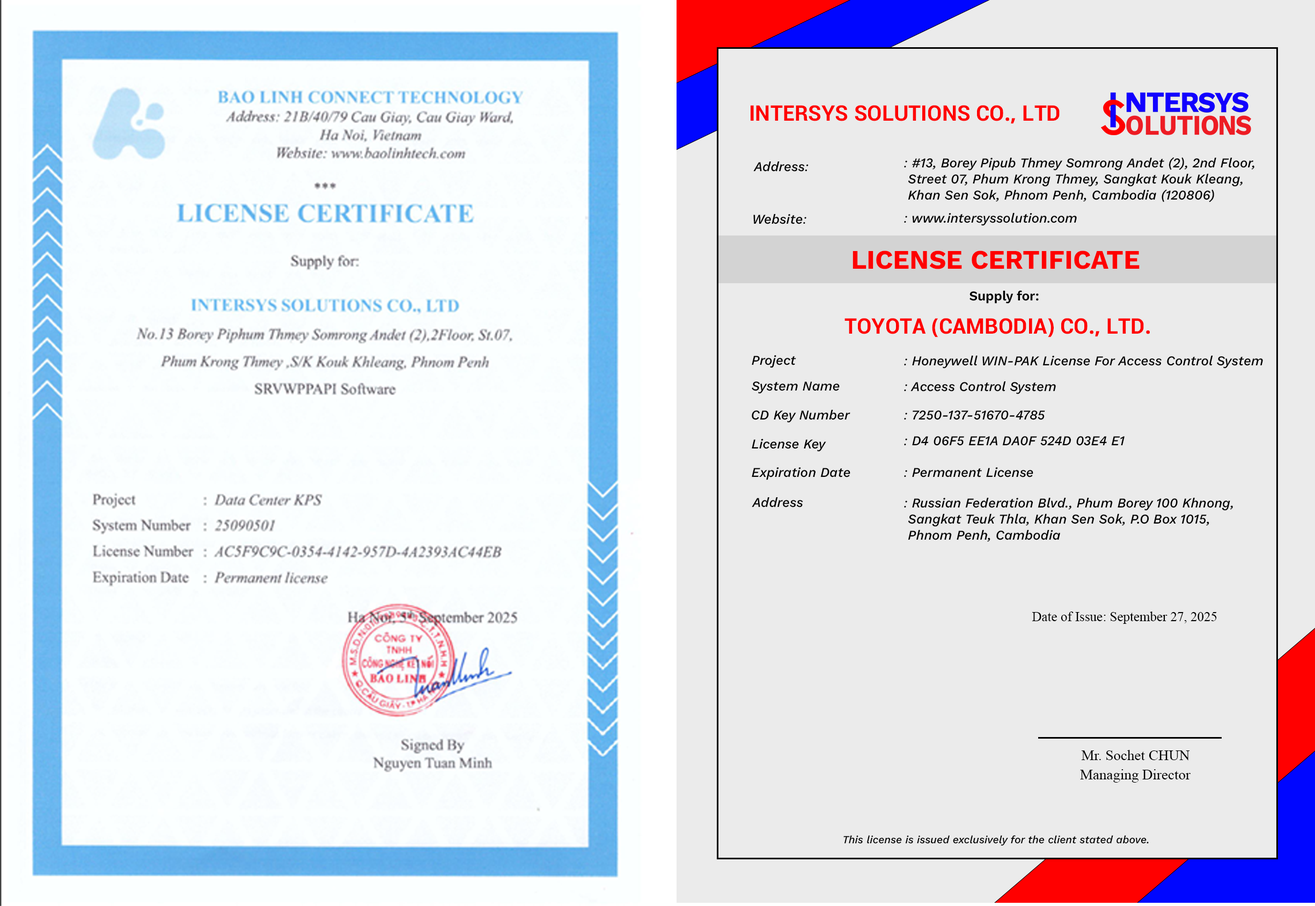
<style>
.page{position:relative;width:1315px;height:906px;background:#ebebeb}
.page>*{position:absolute;margin:0}
.t1{font:21.5px "iKampuchea008_NeakPoan";color:#ff0000}
.t2{font:13.4px "KantumruyProItalic-MediumItalic";color:#000000}
.t3{font:13.4px/16.1px "KantumruyProItalic-MediumItalic";color:#000000}
.t4{font:26.8px "KantumruyProRoman-Bold";color:#ff0000}
.t5{font:13.4px "KantumruyProRoman-SemiBold";color:#000000}
.t6{font:13.4px "TimesNewRomanPSMT";color:#000000}
.t7{font:14.5px "TimesNewRomanPSMT";color:#000000}
.t8{font:10.7px "KantumruyProItalic-MediumItalic";color:#000000}
</style>
<div class="page">
<p class="t1" style="left:751px;top:105px;width:309px;height:19px">INTERSYS SOLUTIONS CO., LTD</p>
<p class="t2" style="left:754px;top:161px;width:55px;height:11px">Address:</p>
<p class="t3" style="left:904px;top:157px;width:351px;height:45px">: #13, Borey Pipub Thmey Somrong Andet (2), 2nd Floor,  <br> Street 07, Phum Krong Thmey, Sangkat Kouk Kleang,  <br> Khan Sen Sok, Phnom Penh, Cambodia (120806)</p>
<p class="t2" style="left:754px;top:214px;width:53px;height:10px">Website:</p>
<p class="t2" style="left:904px;top:213px;width:173px;height:13px">: www.intersyssolution.com</p>
<p class="t4" style="left:853px;top:251px;width:287px;height:18px">LICENSE CERTIFICATE</p>
<p class="t5" style="left:970px;top:290px;width:69px;height:14px">Supply for:</p>
<p class="t1" style="left:845px;top:318px;width:305px;height:20px">TOYOTA (CAMBODIA) CO., LTD.</p>
<p class="t2" style="left:752px;top:355px;width:44px;height:13px">Project</p>
<p class="t2" style="left:904px;top:355px;width:359px;height:14px">: Honeywell WIN-PAK License For Access Control System</p>
<p class="t2" style="left:752px;top:382px;width:88px;height:12px">System Name</p>
<p class="t2" style="left:904px;top:381px;width:152px;height:13px">: Access Control System</p>
<p class="t2" style="left:752px;top:410px;width:99px;height:13px">CD Key Number</p>
<p class="t2" style="left:904px;top:411px;width:141px;height:9px">: 7250-137-51670-4785</p>
<p class="t2" style="left:904px;top:436px;width:221px;height:10px">: D4 06F5 EE1A DA0F 524D 03E4 E1</p>
<p class="t2" style="left:752px;top:439px;width:75px;height:13px">License Key</p>
<p class="t2" style="left:752px;top:467px;width:99px;height:13px">Expiration Date</p>
<p class="t2" style="left:904px;top:467px;width:130px;height:11px">: Permanent License</p>
<p class="t2" style="left:752px;top:497px;width:51px;height:11px">Address</p>
<p class="t3" style="left:904px;top:498px;width:329px;height:44px">: Russian Federation Blvd., Phum Borey 100 Khnong, <br> Sangkat Teuk Thla, Khan Sen Sok, P.O Box 1015, <br> Phnom Penh, Cambodia</p>
<p class="t6" style="left:1032px;top:612px;width:185px;height:12px">Date of Issue: September 27, 2025</p>
<p class="t7" style="left:1081px;top:750px;width:109px;height:11px">Mr. Sochet CHUN</p>
<p class="t7" style="left:1080px;top:770px;width:111px;height:13px">Managing Director</p>
<p class="t8" style="left:844px;top:836px;width:305px;height:10px">This license is issued exclusively for the client stated above.</p>
</div>
